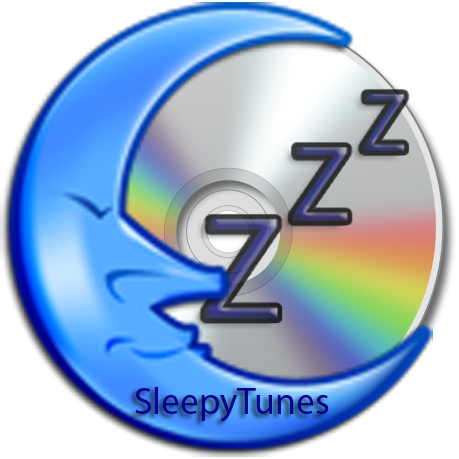
<style>
.page{position:relative;width:459px;height:459px;background:#ffffff}
.page>*{position:absolute;margin:0}
.t1{font:37.8px "MyriadPro-Regular";color:#06038e}
</style>
<div class="page">
<p class="t1" style="left:135px;top:387px;width:194px;height:35px">SleepyTunes</p>
</div>
